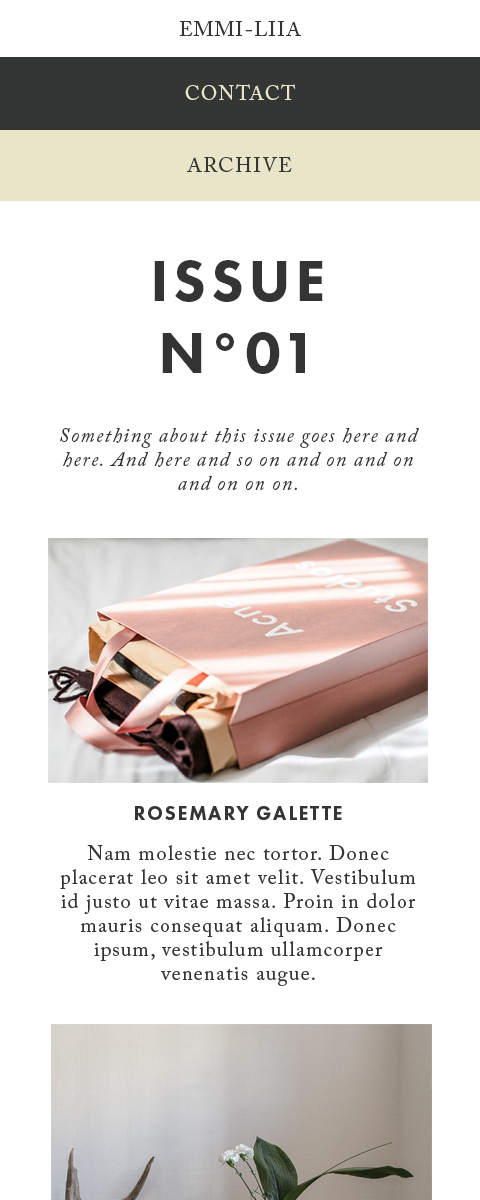
<style>
.page{position:relative;width:480px;height:1200px;background:#ffffff}
.page>*{position:absolute;margin:0}
.t1{font:20px "ACaslonPro-Regular";letter-spacing:0.075em;color:#353434}
.t2{font:20px "ACaslonPro-Regular";letter-spacing:0.075em;color:#e8e5c8}
.t3{font:20px "ACaslonPro-Regular";letter-spacing:0.075em;color:#343535}
.t4{font:60px "FuturaPT-Heavy";letter-spacing:0.075em;color:#353434}
.t5{font:20px "ACaslonPro-Italic";letter-spacing:0.075em;color:#353434}
</style>
<div class="page">
<p class="t1" style="left:179px;top:21px;width:123px;height:15px">EMMI-LIIA</p>
<p class="t2" style="left:185px;top:84px;width:111px;height:16px">CONTACT</p>
<p class="t3" style="left:186px;top:157px;width:106px;height:15px">ARCHIVE</p>
<p class="t4" style="left:154px;top:260px;width:169px;height:114px;text-align:center">ISSUE<br>N°01</p>
<p class="t5" style="left:60px;top:428px;width:359px;height:62px;text-align:center">Something about this issue goes here and here. And here and so on and on and on and on on on.</p>
</div>
